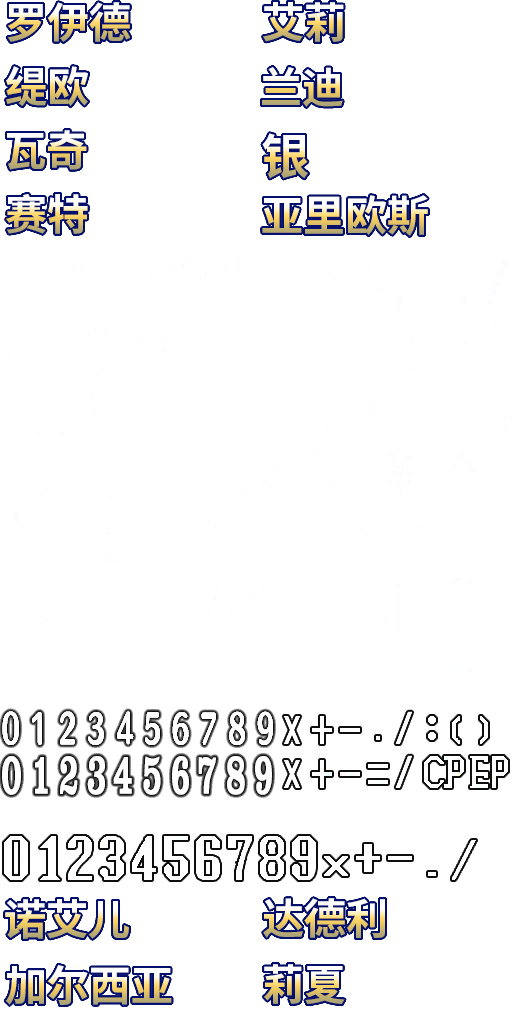
<style>
.page{position:relative;width:512px;height:1024px;background:#ffffff}
.page>*{position:absolute;margin:0}
.t1{font:42px "SourceHanSansSC-Bold"}
.t2{font:48px "SourceHanSansSC-Bold"}
</style>
<div class="page">
<p class="t1" style="left:7px;top:2px;width:123px;height:40px">罗伊德</p>
<p class="t1" style="left:263px;top:2px;width:81px;height:40px">艾莉</p>
<p class="t1" style="left:6px;top:66px;width:82px;height:40px">缇欧</p>
<p class="t1" style="left:262px;top:67px;width:81px;height:40px">兰迪</p>
<p class="t1" style="left:7px;top:130px;width:80px;height:40px">瓦奇</p>
<p class="t2" style="left:262px;top:133px;width:46px;height:46px">银</p>
<p class="t1" style="left:6px;top:194px;width:82px;height:40px">赛特</p>
<p class="t1" style="left:262px;top:195px;width:166px;height:41px">亚里欧斯</p>
<p class="t1" style="left:5px;top:899px;width:124px;height:40px">诺艾儿</p>
<p class="t1" style="left:263px;top:898px;width:122px;height:40px">达德利</p>
<p class="t1" style="left:5px;top:965px;width:167px;height:40px">加尔西亚</p>
<p class="t1" style="left:264px;top:964px;width:81px;height:40px">莉夏</p>
</div>
